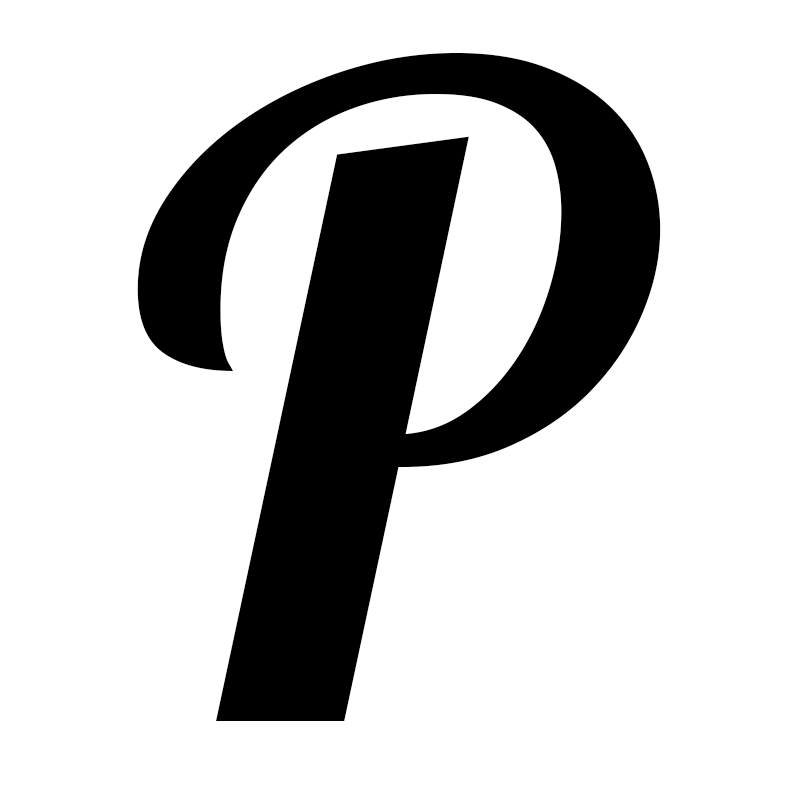
<style>
.page{position:relative;width:800px;height:800px;background:#ffffff}
.page>*{position:absolute;margin:0}
.t1{font:890px "LobsterTwo-BoldItalic";color:#000000}
.t2{font:890px "LobsterTwo-BoldItalic";color:#ffffff}
</style>
<div class="page">
<p class="t1" style="left:137px;top:53px;width:524px;height:668px"><span class="t2"> </span>P</p>
</div>
